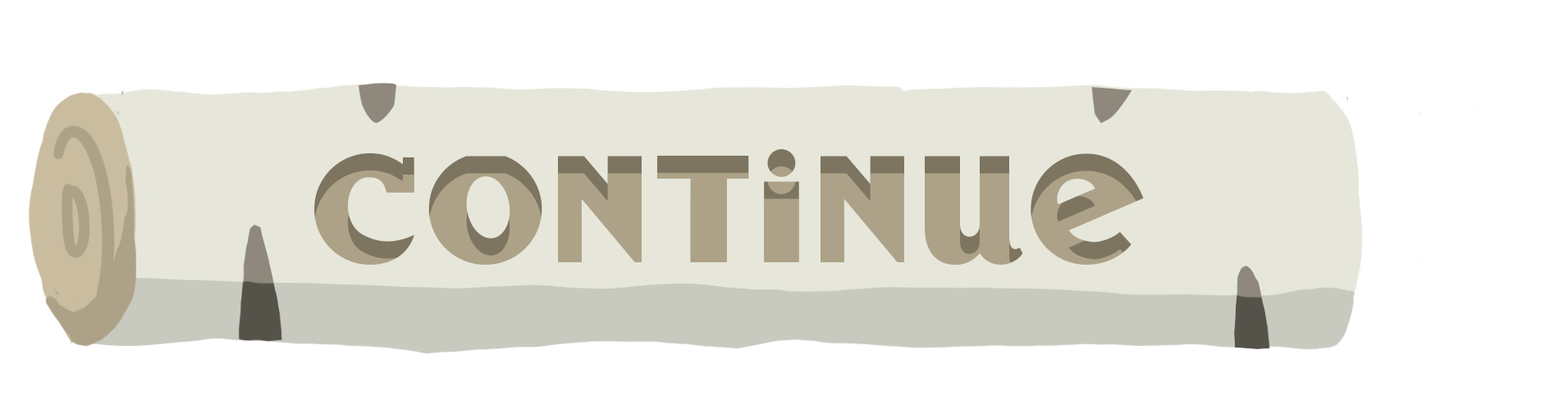
<style>
.page{position:relative;width:1568px;height:409px;background:#ffffff}
.page>*{position:absolute;margin:0}
.t1{font:148px "BadTyp-Regular";color:#ada288}
</style>
<div class="page">
<p class="t1" style="left:314px;top:149px;width:830px;height:117px">continue</p>
</div>
